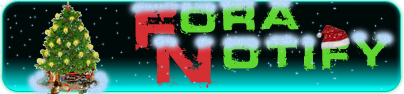
<style>
.page{position:relative;width:404px;height:94px}
.page>*{position:absolute;margin:0}
.t1{font:58.3px "Defused-ExtendedBold";letter-spacing:0.2em;color:#d62f33}
.t2{font:37.5px "Defused-ExtendedBold";letter-spacing:0.2em;color:#5ed62f}
</style>
<div class="page">
<p class="t1" style="left:134px;top:3px;width:44px;height:48px">F</p>
<p class="t2" style="left:177px;top:0px;width:123px;height:36px">ora</p>
<p class="t1" style="left:154px;top:39px;width:63px;height:50px">N</p>
<p class="t2" style="left:220px;top:36px;width:170px;height:36px">otify</p>
</div>
